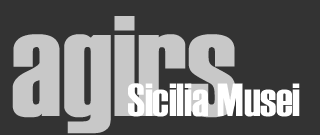
<style>
.page{position:relative;width:320px;height:135px;background:#333333}
.page>*{position:absolute;margin:0}
.t1{font:143px "Haettenschweiler";color:#c8c8c8}
.t2{font:46.4px "Haettenschweiler";color:#ffffff}
</style>
<div class="page">
<p class="t1" style="left:12px;top:16px;width:223px;height:118px">agirs</p>
<p class="t2" style="left:128px;top:83px;width:172px;height:34px">Sicilia Musei</p>
</div>
